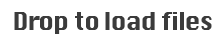
<style>
.page{position:relative;width:223px;height:44px;background:#ffffff}
.page>*{position:absolute;margin:0}
.t1{font:24.3px "Silom";letter-spacing:-0.05em;color:#3b3b3b}
</style>
<div class="page">
<p class="t1" style="left:14px;top:12px;width:198px;height:22px">Drop to load files</p>
</div>
